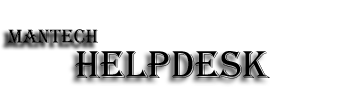
<style>
.page{position:relative;width:339px;height:89px;background:#ffffff}
.page>*{position:absolute;margin:0}
.t1{font:20px "Algerian";color:#000000}
.t2{font:40px "Algerian";color:#000000}
</style>
<div class="page">
<p class="t1" style="left:7px;top:29px;width:91px;height:15px">MANTECH</p>
<p class="t2" style="left:75px;top:51px;width:195px;height:28px">HelpDesk</p>
</div>
